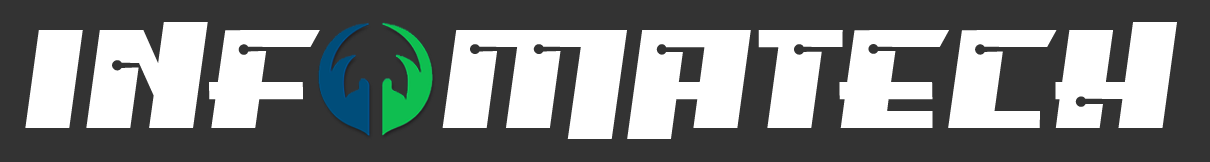
<style>
.page{position:relative;width:1210px;height:162px;background:#333333}
.page>*{position:absolute;margin:0}
.t1{font:155.2px "PsiphoonBB";color:#ffffff}
</style>
<div class="page">
<p class="t1" style="left:25px;top:22px;width:1152px;height:117px">iNF   MATECH</p>
</div>
